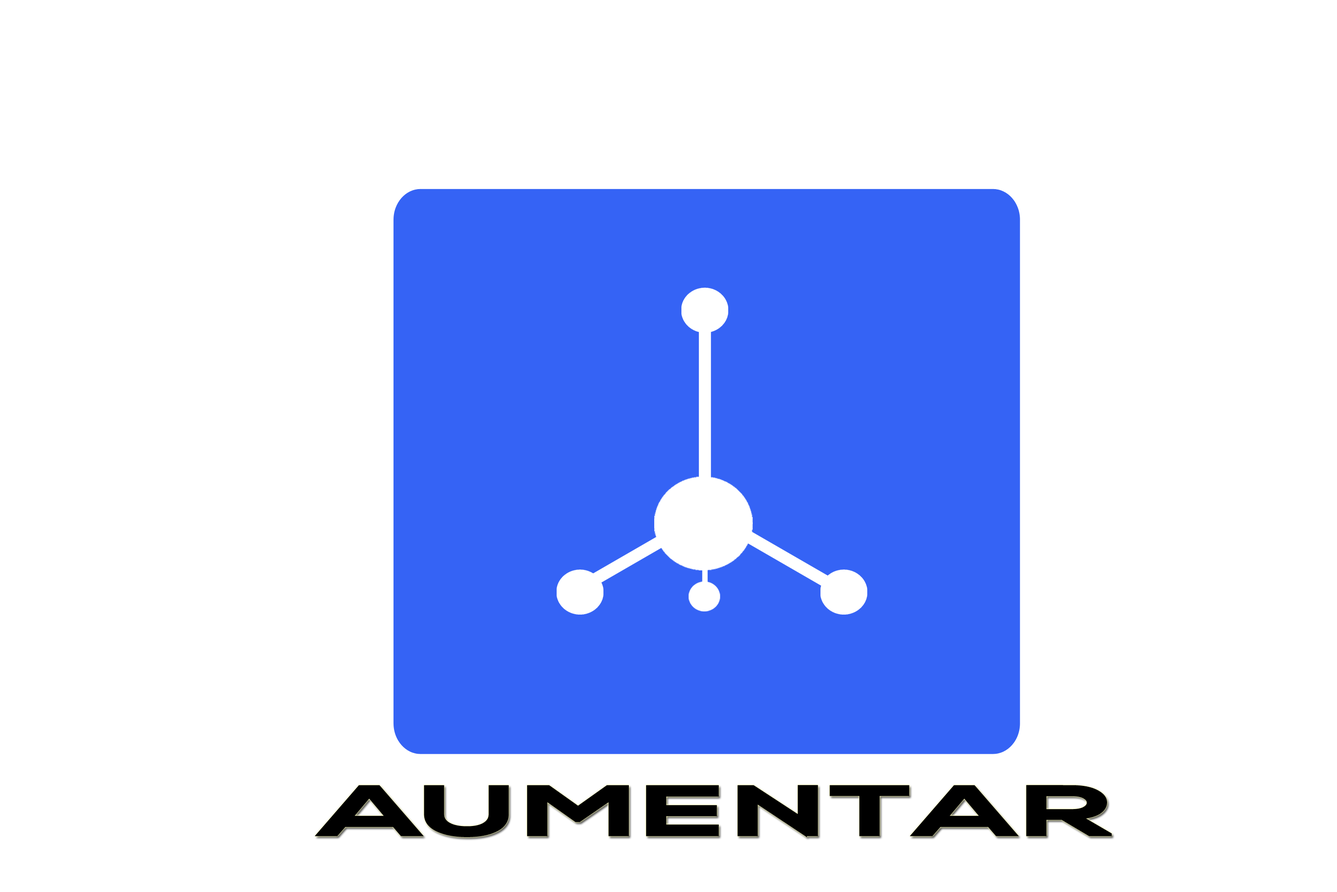
<style>
.page{position:relative;width:1337px;height:892px;background:#ffffff}
.page>*{position:absolute;margin:0}
.t1{font:69.1px "NexaBold";color:#000000;font-weight:bold;scale:1.94 1}
</style>
<div class="page">
<p class="t1" style="left:315px;top:785px;width:797px;height:52px">AUMENTAR</p>
</div>
